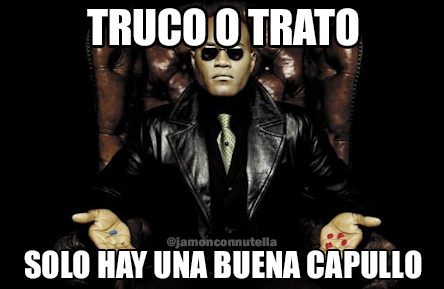
<style>
.page{position:relative;width:444px;height:289px;background:#000000}
.page>*{position:absolute;margin:0}
.t1{font:45.4px "Impact";color:#ffffff}
.t2{font:12.7px "FranklinGothic-Heavy";color:#585858}
.t3{font:34px "Impact";color:#ffffff}
</style>
<div class="page">
<p class="t1" style="left:87px;top:8px;width:272px;height:38px">TRUCO O TRATO</p>
<p class="t2" style="left:167px;top:237px;width:110px;height:12px">@jamonconnutella</p>
<p class="t3" style="left:24px;top:250px;width:398px;height:29px">SOLO HAY UNA BUENA CAPULLO</p>
</div>
